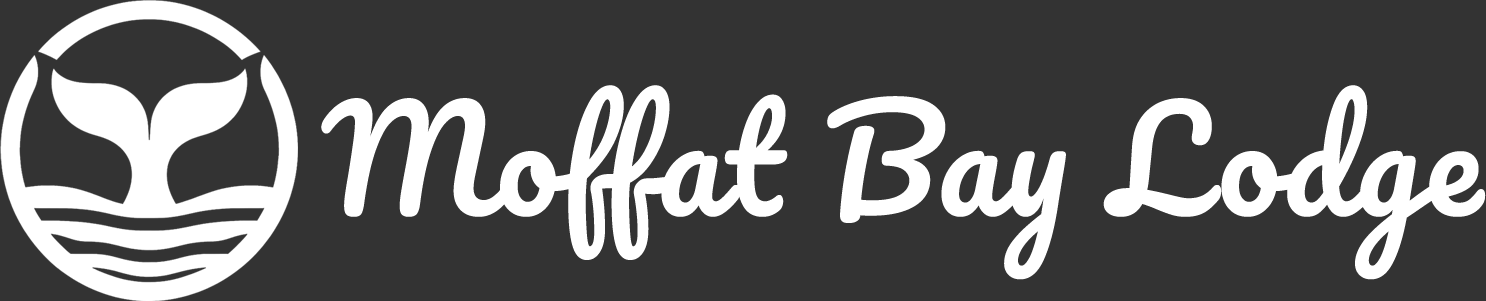
<style>
.page{position:relative;width:1486px;height:301px;background:#333333}
.page>*{position:absolute;margin:0}
.t1{font:138.9px "Pacifico-Regular";letter-spacing:0.02em;color:#ffffff}
</style>
<div class="page">
<p class="t1" style="left:321px;top:85px;width:1165px;height:195px">Moffat Bay Lodge</p>
</div>
